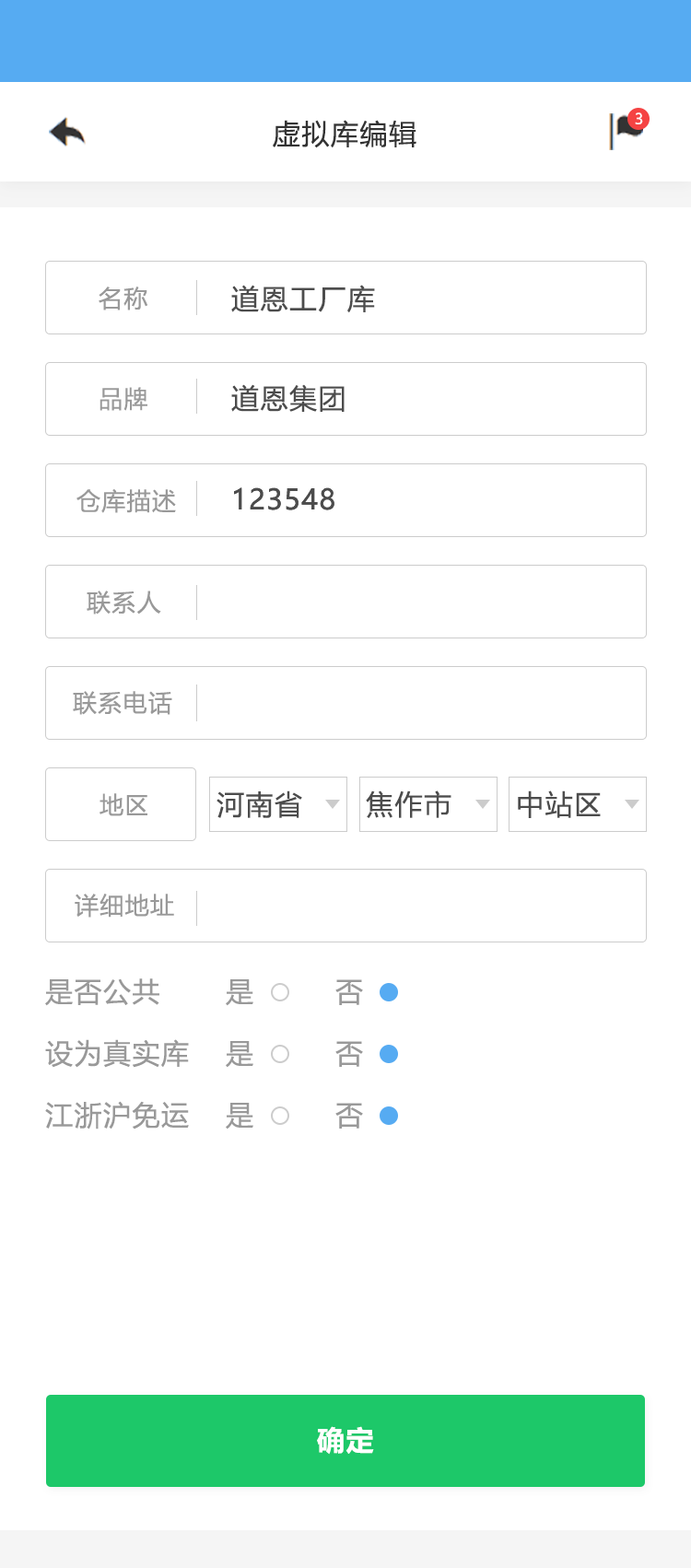
<style>
.page{position:relative;width:691px;height:1568px;background:#ffffff}
.page>*{position:absolute;margin:0}
.t1{font:14.7px "MicrosoftYaHeiUI";color:#ffffff}
.t2{font:27.6px "MicrosoftYaHeiUI";letter-spacing:0.05em;color:#333333}
.t3{font:24px "MicrosoftYaHeiUI";letter-spacing:0.05em;color:#999999}
.t4{font:27.6px "MicrosoftYaHeiUI";letter-spacing:0.05em;color:#4c4c4c}
.t5{font:27.6px "MicrosoftYaHeiUI";letter-spacing:0.05em;color:#999999}
.t6{font:27.6px "MicrosoftYaHeiUI-Bold";letter-spacing:0.05em;color:#ffffff}
</style>
<div class="page">
<p class="t1" style="left:635px;top:112px;width:8px;height:12px">3</p>
<p class="t2" style="left:273px;top:120px;width:143px;height:28px">虚拟库编辑</p>
<p class="t3" style="left:99px;top:287px;width:49px;height:23px">名称</p>
<p class="t4" style="left:231px;top:285px;width:144px;height:28px">道恩工厂库</p>
<p class="t3" style="left:99px;top:387px;width:48px;height:24px">品牌</p>
<p class="t4" style="left:231px;top:384px;width:114px;height:28px">道恩集团</p>
<p class="t3" style="left:76px;top:488px;width:100px;height:25px">仓库描述</p>
<p class="t4" style="left:234px;top:487px;width:100px;height:23px">123548</p>
<p class="t4" style="left:234px;top:487px;width:100px;height:23px">123548</p>
<p class="t3" style="left:87px;top:591px;width:74px;height:23px">联系人</p>
<p class="t3" style="left:73px;top:691px;width:99px;height:24px">联系电话</p>
<p class="t3" style="left:99px;top:793px;width:48px;height:23px">地区</p>
<p class="t4" style="left:216px;top:790px;width:86px;height:28px">河南省</p>
<p class="t4" style="left:366px;top:790px;width:85px;height:28px">焦作市</p>
<p class="t4" style="left:518px;top:790px;width:83px;height:28px">中站区</p>
<p class="t3" style="left:75px;top:894px;width:99px;height:24px">详细地址</p>
<p class="t5" style="left:45px;top:978px;width:114px;height:28px">是否公共</p>
<p class="t5" style="left:226px;top:979px;width:27px;height:27px">是</p>
<p class="t5" style="left:335px;top:979px;width:28px;height:26px">否</p>
<p class="t5" style="left:45px;top:1039px;width:144px;height:29px">设为真实库</p>
<p class="t5" style="left:226px;top:1041px;width:27px;height:27px">是</p>
<p class="t5" style="left:335px;top:1041px;width:28px;height:26px">否</p>
<p class="t5" style="left:45px;top:1101px;width:144px;height:28px">江浙沪免运</p>
<p class="t5" style="left:226px;top:1103px;width:27px;height:26px">是</p>
<p class="t5" style="left:335px;top:1103px;width:28px;height:26px">否</p>
<p class="t6" style="left:317px;top:1426px;width:57px;height:29px">确定</p>
</div>
